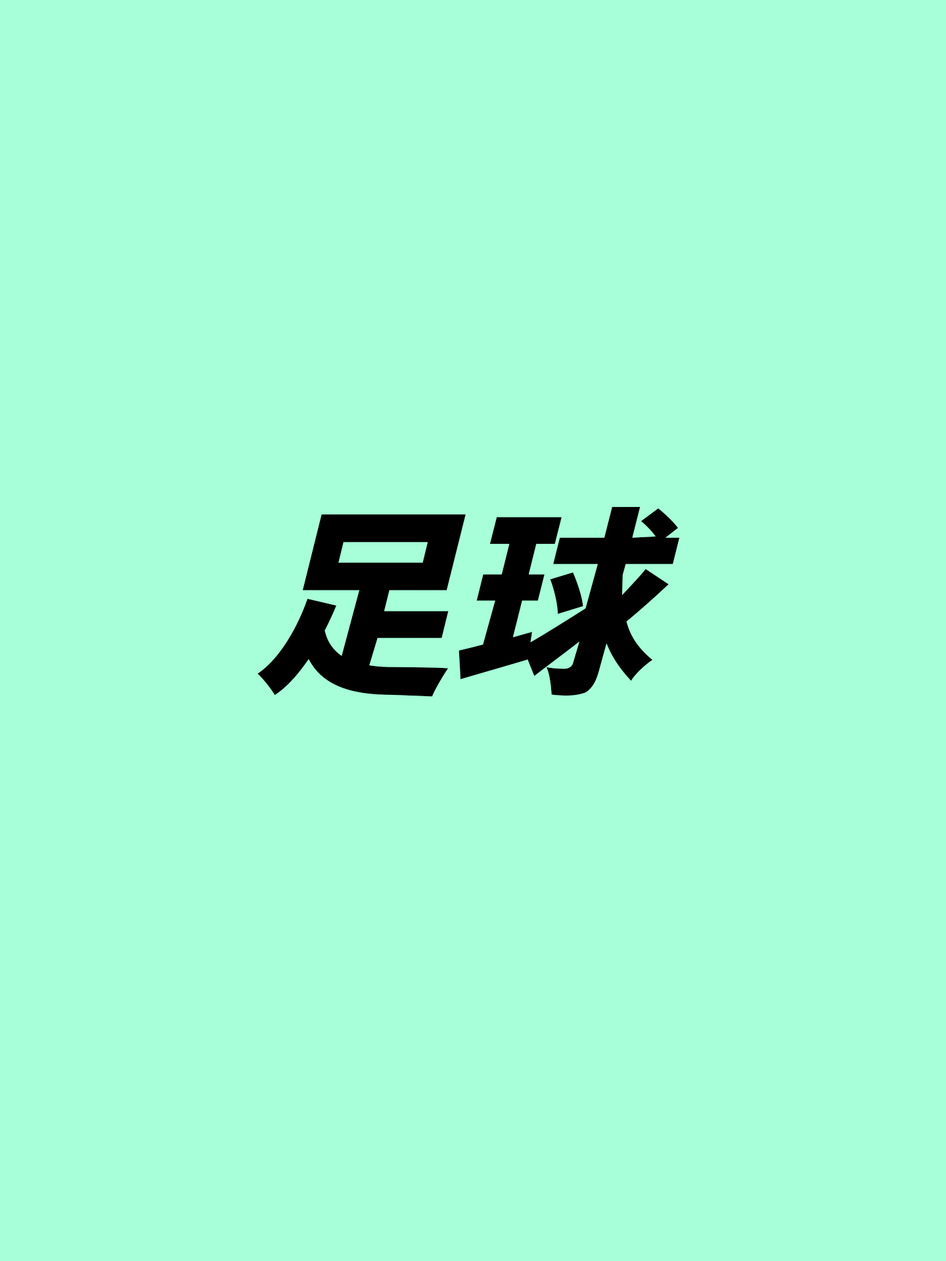
<style>
.page{position:relative;width:946px;height:1261px;background:#a6ffd8}
.page>*{position:absolute;margin:0}
.t1{font:199.5px "Source-KeynoteartHans-Regular";color:#000000}
</style>
<div class="page">
<p class="t1" style="left:257px;top:506px;width:423px;height:191px">足球</p>
</div>
